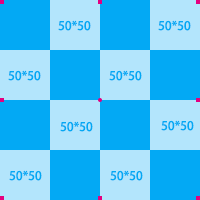
<style>
.page{position:relative;width:200px;height:200px;background:#03a9f4}
.page>*{position:absolute;margin:0}
.t1{font:12px "AdobeHeitiStd-Regular";color:#03a9f4}
</style>
<div class="page">
<p class="t1" style="left:58px;top:20px;width:33px;height:11px">50*50</p>
<p class="t1" style="left:158px;top:20px;width:33px;height:11px">50*50</p>
<p class="t1" style="left:8px;top:70px;width:33px;height:11px">50*50</p>
<p class="t1" style="left:109px;top:70px;width:33px;height:11px">50*50</p>
<p class="t1" style="left:60px;top:121px;width:33px;height:11px">50*50</p>
<p class="t1" style="left:161px;top:120px;width:33px;height:11px">50*50</p>
<p class="t1" style="left:9px;top:170px;width:33px;height:11px">50*50</p>
<p class="t1" style="left:110px;top:170px;width:33px;height:11px">50*50</p>
</div>
